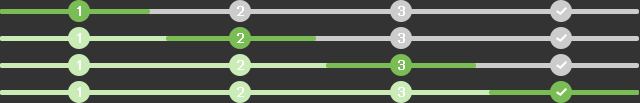
<style>
.page{position:relative;width:640px;height:103px;background:#333333}
.page>*{position:absolute;margin:0}
.t1{font:14px "ArialMT";color:#ffffff;font-weight:bold}
</style>
<div class="page">
<p class="t1" style="left:77px;top:6px;width:4px;height:10px">1</p>
<p class="t1" style="left:237px;top:6px;width:7px;height:10px">2</p>
<p class="t1" style="left:398px;top:6px;width:7px;height:10px">3</p>
<p class="t1" style="left:77px;top:33px;width:4px;height:10px">1</p>
<p class="t1" style="left:237px;top:33px;width:7px;height:10px">2</p>
<p class="t1" style="left:398px;top:33px;width:7px;height:10px">3</p>
<p class="t1" style="left:77px;top:60px;width:4px;height:10px">1</p>
<p class="t1" style="left:237px;top:60px;width:7px;height:10px">2</p>
<p class="t1" style="left:398px;top:60px;width:7px;height:10px">3</p>
<p class="t1" style="left:77px;top:87px;width:4px;height:10px">1</p>
<p class="t1" style="left:237px;top:87px;width:7px;height:10px">2</p>
<p class="t1" style="left:398px;top:87px;width:7px;height:10px">3</p>
</div>
